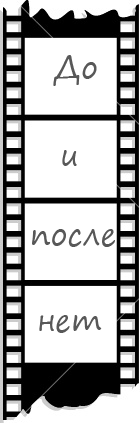
<style>
.page{position:relative;width:140px;height:423px;background:#ffffff}
.page>*{position:absolute;margin:0}
.t1{font:30px "SegoePrint";color:#585858}
</style>
<div class="page">
<p class="t1" style="left:53px;top:55px;width:44px;height:31px">До</p>
<p class="t1" style="left:62px;top:150px;width:15px;height:16px">и</p>
<p class="t1" style="left:32px;top:229px;width:83px;height:18px">после</p>
<p class="t1" style="left:39px;top:315px;width:63px;height:18px">нет</p>
</div>
